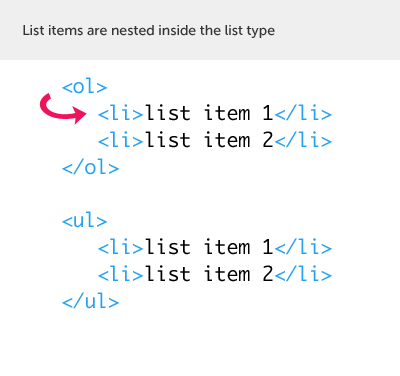
<style>
.page{position:relative;width:400px;height:376px;background:#ffffff}
.page>*{position:absolute;margin:0}
.t1{font:14px "MuseoSans-500";color:#333333}
.t2{font:19.6px/9.3px "Monaco";color:#26a1f0}
.t3{font:19.6px/9.3px "Monaco";color:#000000}
</style>
<div class="page">
<p class="t1" style="left:23px;top:25px;width:252px;height:13px">List items are nested inside the list type</p>
<p class="t2" style="left:61px;top:77px;width:272px;height:232px">&lt;ol&gt;<br> &lt;li&gt;<span class="t3">list item 1</span>&lt;/li&gt;<br> &lt;li&gt;<span class="t3">list item 2</span>&lt;/li&gt;<br>&lt;/ol&gt;<br><br>&lt;ul&gt;<br> &lt;li&gt;<span class="t3">list item 1</span>&lt;/li&gt;<br> &lt;li&gt;<span class="t3">list item 2</span>&lt;/li&gt;<br>&lt;/ul&gt;</p>
</div>
